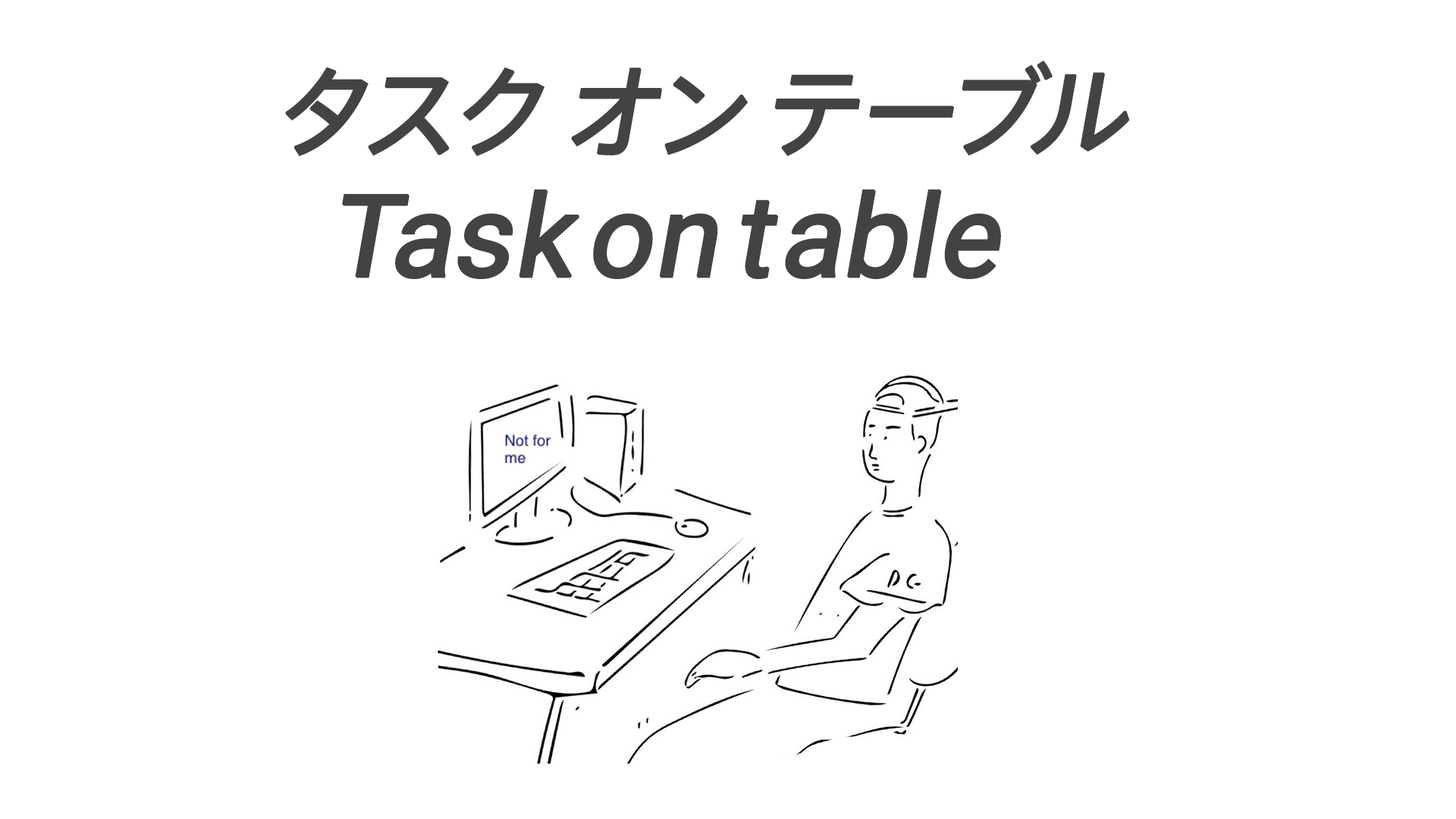
<style>
.page{position:relative;width:1456px;height:819px;background:#ffffff}
.page>*{position:absolute;margin:0}
.t1{font:113.7px/116.8px "Roboto-Regular";letter-spacing:0.1em;color:#434341;font-weight:bold;font-style:italic}
.t2{font:98.6px/116.8px "AxisStd-Regular";letter-spacing:0.1em;color:#434341;font-weight:bold;font-style:italic}
</style>
<div class="page">
<p class="t1" style="left:285px;top:61px;width:845px;height:218px;text-align:center"><span class="t2">タスクオンテーブル<br></span>Taskontable</p>
</div>
